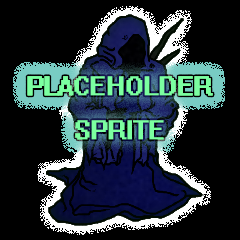
<style>
.page{position:relative;width:240px;height:240px;background:#000000}
.page>*{position:absolute;margin:0}
.t1{font:24px/44.3px "System";letter-spacing:-0.01em;color:#7bffa0;font-weight:bold}
</style>
<div class="page">
<p class="t1" style="left:27px;top:76px;width:186px;height:64px;text-align:center">PLACEHOLDER<br>SPRITE</p>
</div>
